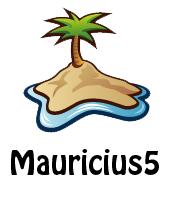
<style>
.page{position:relative;width:170px;height:200px;background:#ffffff}
.page>*{position:absolute;margin:0}
.t1{font:30px "HoboStd";color:#000000}
</style>
<div class="page">
<p class="t1" style="left:11px;top:149px;width:148px;height:26px">Mauricius5</p>
</div>
